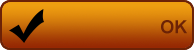
<style>
.page{position:relative;width:194px;height:50px}
.page>*{position:absolute;margin:0}
.t1{font:18px "Arial-BoldMT";color:#6c2206}
</style>
<div class="page">
<p class="t1" style="left:161px;top:20px;width:26px;height:14px">OK</p>
</div>
